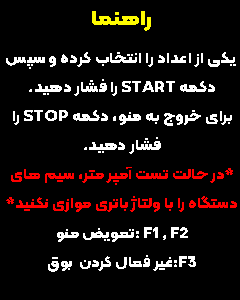
<style>
.page{position:relative;width:240px;height:300px;background:#000000}
.page>*{position:absolute;margin:0}
.t1{font:21.3px "Kalameh-ExtraBold";letter-spacing:0.01em;color:#fffc00;scale:1.12 1}
.t2{font:15.2px/29.2px "Kalameh-ExtraBold";letter-spacing:0.01em;color:#ffffff;scale:1.12 1}
.t3{font:12.2px/16.7px "Kalameh-Bold";letter-spacing:0.01em;color:#fffc00;scale:1.12 1}
.t4{font:14.6px/29.2px "Kalameh-ExtraBold";letter-spacing:0.01em;color:#ff0000;scale:1.12 1}
.t5{font:14.6px/29.2px "Kalameh-ExtraBold";letter-spacing:0.01em;color:#ffffff;scale:1.12 1}
</style>
<div class="page">
<p class="t1" style="left:92px;top:11px;width:59px;height:20px">راهنما</p>
<p class="t2" style="left:6px;top:52px;width:231px;height:220px"><span class="t3">                                        <br></span> یکی از اعداد را انتخاب کرده و سپس دکمه START را فشار دهید.<br>برای خروج به منو، دکمه STOP را فشار دهید.<br><span class="t4">*در حالت تست آمپر متر، سیم های دستگاه را با ولتاژ باتری موازی نکنید*<br></span><span class="t5">F1 , F2 :تعویض منو<br>F3:غیر فعال کردن  بوق</span></p>
</div>
